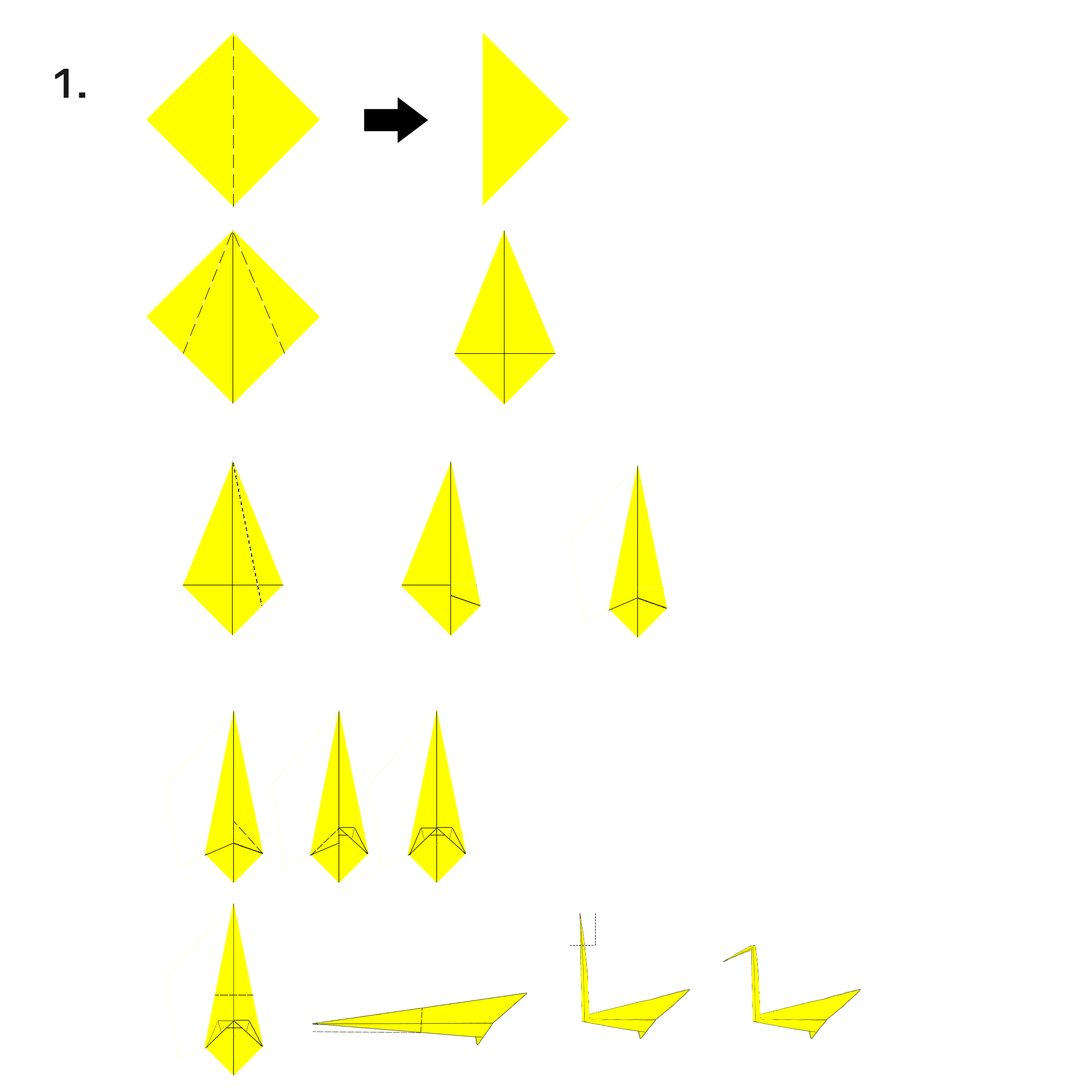
<style>
.page{position:relative;width:1092px;height:1092px;background:#ffffff}
.page>*{position:absolute;margin:0}
.t1{font:43.7px "Play-Regular";color:#181818;font-weight:bold}
</style>
<div class="page">
<p class="t1" style="left:55px;top:69px;width:31px;height:29px">1.</p>
</div>
